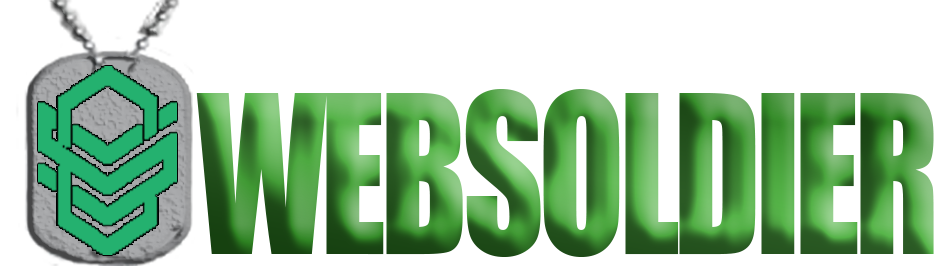
<style>
.page{position:relative;width:950px;height:276px;background:#ffffff}
.page>*{position:absolute;margin:0}
.t1{font:204.3px "Impact";letter-spacing:-0.04em;text-transform:uppercase;scale:0.78 1}
</style>
<div class="page">
<p class="t1" style="left:196px;top:89px;width:738px;height:168px">WebSoldier</p>
</div>
